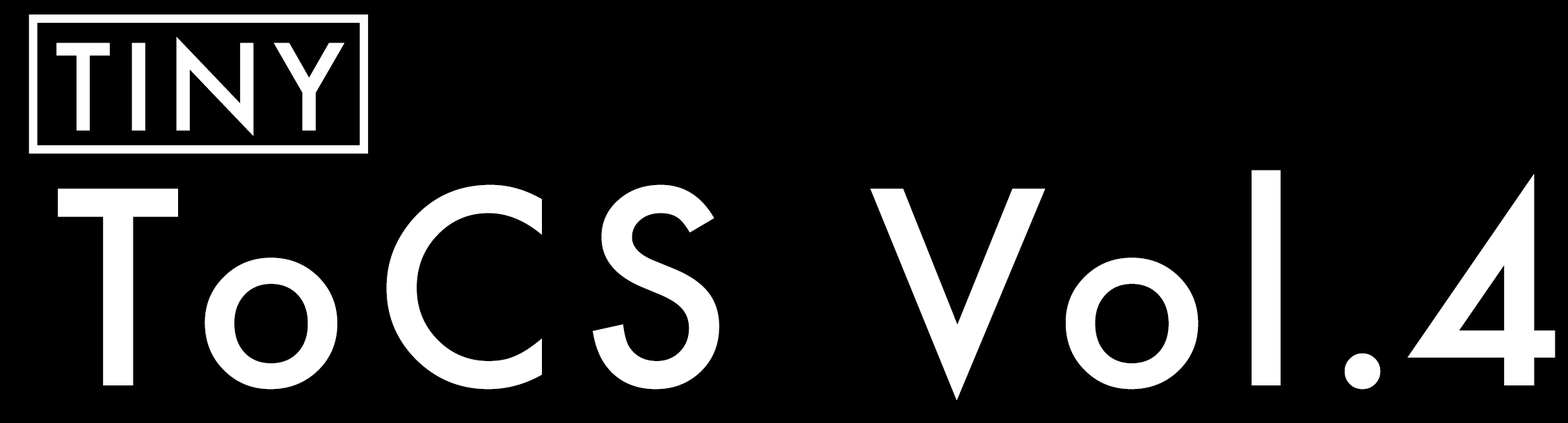
<style>
.page{position:relative;width:1568px;height:423px;background:#000000}
.page>*{position:absolute;margin:0}
.t1{font:115.9px "Futura-Medium";letter-spacing:0.09em;color:#ffffff;text-transform:uppercase}
.t2{font:260.7px "Futura-Medium";letter-spacing:0.09em;color:#ffffff}
.t3{font:260.7px "Futura-Medium";letter-spacing:0.01em;color:#ffffff}
</style>
<div class="page">
<p class="t1" style="left:56px;top:37px;width:663px;height:353px">Tiny<br><span class="t2">ToCS</span></p>
<p class="t2" style="left:870px;top:170px;width:685px;height:231px">Vol<span class="t3">.4</span></p>
</div>
